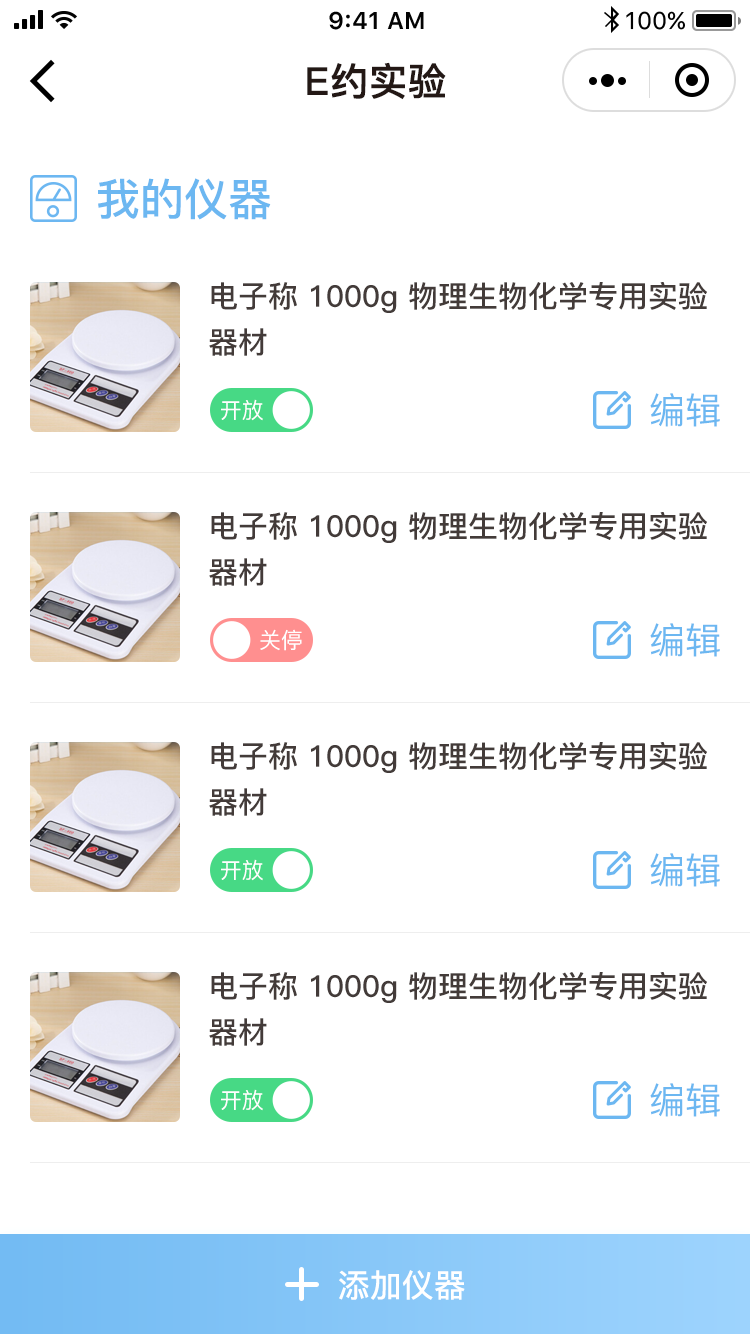
<style>
.page{position:relative;width:750px;height:1334px;background:#ffffff}
.page>*{position:absolute;margin:0}
.t1{font:38px "PingFang-SC-Bold";color:#231815;font-weight:bold}
.t2{font:44px "PingFang-SC-Bold";color:#6cb7f1}
.t3{font:30px/46px "PingFang-SC-Bold";color:#433b39}
.t4{font:22px "PingFang-SC-Medium";color:#ffffff}
.t5{font:36px "PingFang-SC-Medium";color:#6cb7f1}
.t6{font:22.2px "PingFang-SC-Medium";color:#ffffff}
.t7{font:32px "PingFang-SC-Bold";color:#ffffff}
</style>
<div class="page">
<p class="t1" style="left:307px;top:62px;width:139px;height:38px">E约实验</p>
<p class="t2" style="left:98px;top:178px;width:173px;height:42px">我的仪器</p>
<p class="t3" style="left:209px;top:282px;width:498px;height:74px">电子称 1000g 物理生物化学专用实验<br>器材</p>
<p class="t4" style="left:221px;top:399px;width:42px;height:22px">开放</p>
<p class="t5" style="left:650px;top:393px;width:70px;height:34px">编辑</p>
<p class="t3" style="left:209px;top:512px;width:498px;height:74px">电子称 1000g 物理生物化学专用实验<br>器材</p>
<p class="t6" style="left:260px;top:629px;width:42px;height:22px">关停</p>
<p class="t5" style="left:650px;top:623px;width:70px;height:34px">编辑</p>
<p class="t3" style="left:209px;top:742px;width:498px;height:74px">电子称 1000g 物理生物化学专用实验<br>器材</p>
<p class="t5" style="left:650px;top:853px;width:70px;height:34px">编辑</p>
<p class="t4" style="left:221px;top:859px;width:42px;height:22px">开放</p>
<p class="t3" style="left:209px;top:972px;width:498px;height:74px">电子称 1000g 物理生物化学专用实验<br>器材</p>
<p class="t5" style="left:650px;top:1083px;width:70px;height:34px">编辑</p>
<p class="t4" style="left:221px;top:1089px;width:42px;height:22px">开放</p>
<p class="t7" style="left:339px;top:1270px;width:126px;height:30px">添加仪器</p>
</div>
